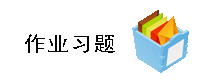
<style>
.page{position:relative;width:198px;height:80px;background:#ffffff}
.page>*{position:absolute;margin:0}
.t1{font:20.9px "SimHei";letter-spacing:0.05em;color:#050505;scale:1.03 1}
</style>
<div class="page">
<p class="t1" style="left:25px;top:34px;width:90px;height:19px">作业习题</p>
</div>
